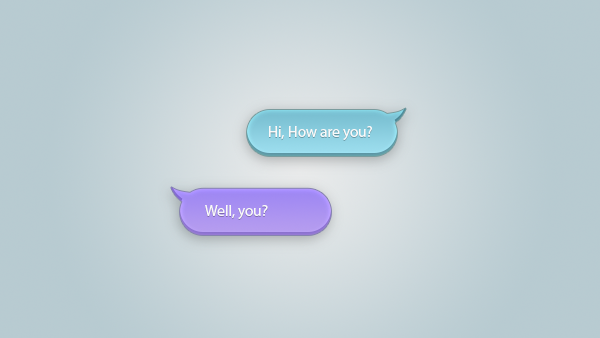
<style>
.page{position:relative;width:600px;height:338px}
.page>*{position:absolute;margin:0}
.t1{font:15.1px "MyriadPro-Regular";color:#f9f9f9}
</style>
<div class="page">
<p class="t1" style="left:269px;top:126px;width:103px;height:14px">Hi, How are you?</p>
<p class="t1" style="left:205px;top:205px;width:63px;height:14px">Well, you?</p>
</div>
